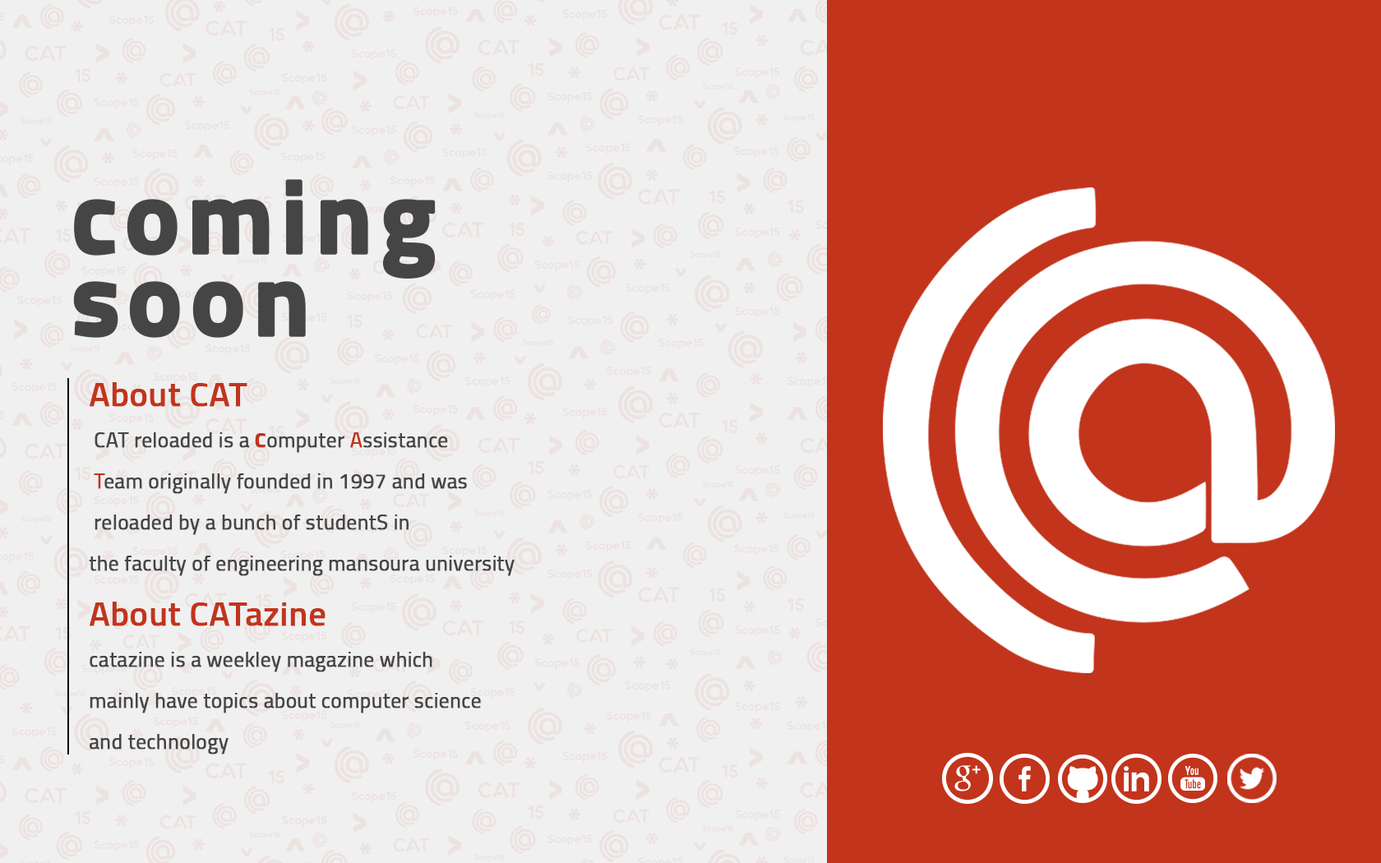
<style>
.page{position:relative;width:1381px;height:863px;background:#f0f0f0}
.page>*{position:absolute;margin:0}
.t1{font:102.8px/82.2px "Cairo-Bold";letter-spacing:0.05em;color:#454545;font-weight:bold}
.t2{font:20.6px/41.1px "Cairo-Regular";color:#454545;font-weight:bold}
.t3{font:34.3px/82.2px "Cairo-SemiBold";color:#c2341c;font-weight:bold}
.t4{font:20.6px/41.1px "Cairo-Bold";color:#c2341c;font-weight:bold}
.t5{font:20.6px/41.1px "Cairo-Regular";color:#c2341c;font-weight:bold}
.t6{font:34.3px/54.8px "Cairo-SemiBold";color:#c2341c;font-weight:bold}
</style>
<div class="page">
<p class="t1" style="left:73px;top:179px;width:363px;height:159px;text-align:right">coming<br>soon</p>
<p class="t2" style="left:89px;top:382px;width:426px;height:373px;text-align:right"><span class="t3">About CAT<br></span>CAT reloaded is a <span class="t4">C</span>omputer <span class="t5">A</span>ssistance <br><span class="t5">T</span>eam originally founded in 1997 and was <br>reloaded by a bunch of studentS in <br>the faculty of engineering mansoura university<br><span class="t6">About CATazine<br></span>catazine is a weekley magazine which<br>mainly have topics about computer science<br>and technology</p>
</div>
